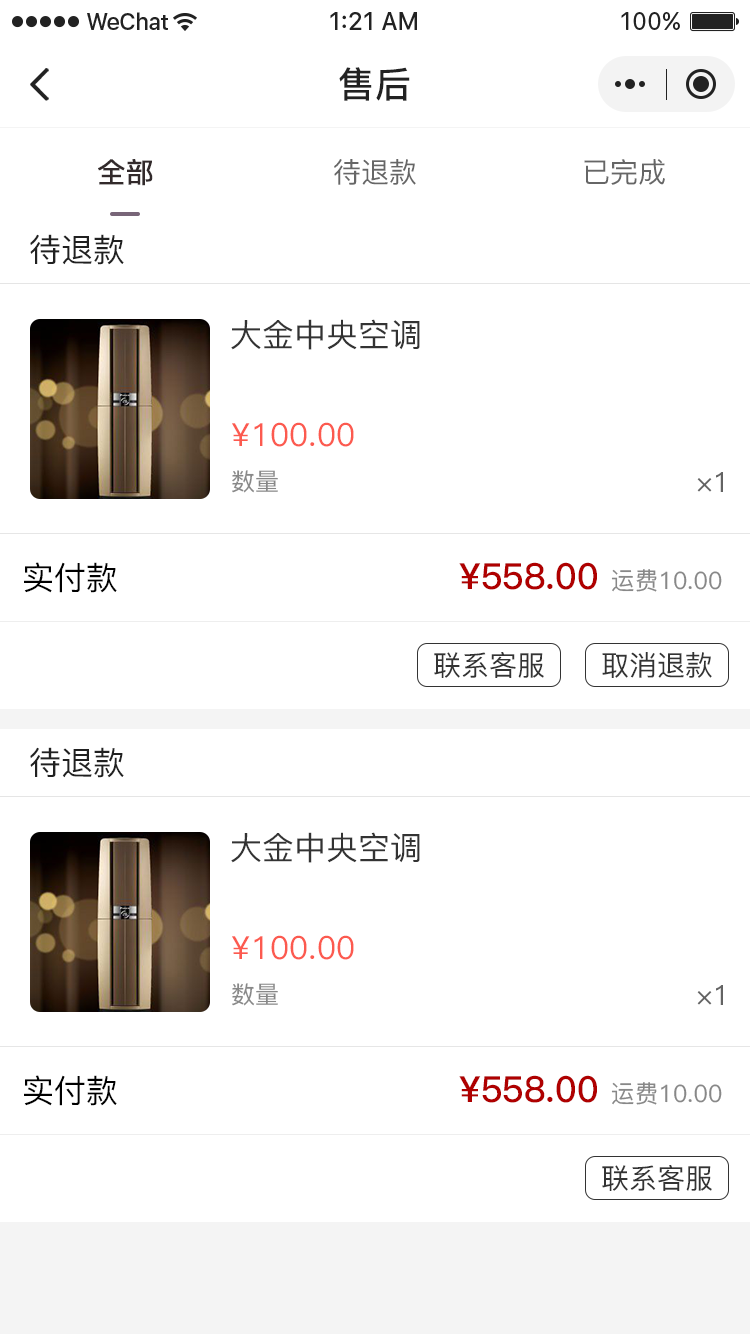
<style>
.page{position:relative;width:750px;height:1334px;background:#ffffff}
.page>*{position:absolute;margin:0}
.t1{font:36px "PingFang-SC-Bold";letter-spacing:0.028em;color:#222222}
.t2{font:28px "PingFang-SC-Medium";color:#322a2b;font-weight:bold}
.t3{font:28px "PingFang-SC-Medium";color:#666666}
.t4{font:32px "PingFang-SC-Medium";color:#202020}
.t5{font:32px "PingFang-SC-Medium";color:#333333;text-transform:uppercase}
.t6{font:32px "PingFang-SC-Medium";color:#fc5a4f;text-transform:uppercase}
.t7{font:24px "PingFang-SC-Medium";color:#888888;text-transform:uppercase}
.t8{font:28px "PingFang-SC-Medium";color:#636363;text-transform:uppercase}
.t9{font:32px "PingFang-SC-Medium";color:#000000;text-transform:uppercase}
.t10{font:36px "PingFang-SC-Bold";color:#af0000;text-transform:uppercase}
.t11{font:28px "PingFang-SC-Medium";color:#333333}
</style>
<div class="page">
<p class="t1" style="left:339px;top:67px;width:71px;height:34px">售后</p>
<p class="t2" style="left:98px;top:159px;width:55px;height:27px">全部</p>
<p class="t3" style="left:334px;top:159px;width:82px;height:26px">待退款</p>
<p class="t3" style="left:584px;top:159px;width:81px;height:26px">已完成</p>
<p class="t4" style="left:30px;top:234px;width:94px;height:31px">待退款</p>
<p class="t5" style="left:231px;top:319px;width:189px;height:31px">大金中央空调</p>
<p class="t6" style="left:232px;top:422px;width:122px;height:25px">¥100.00</p>
<p class="t7" style="left:232px;top:470px;width:46px;height:23px">数量</p>
<p class="t8" style="left:697px;top:472px;width:26px;height:20px">×1</p>
<p class="t9" style="left:24px;top:562px;width:93px;height:31px">实付款</p>
<p class="t10" style="left:459px;top:562px;width:263px;height:30px">¥558.00 <span class="t7">运费10.00</span></p>
<p class="t11" style="left:434px;top:652px;width:110px;height:26px">联系客服</p>
<p class="t11" style="left:602px;top:652px;width:110px;height:26px">取消退款</p>
<p class="t4" style="left:30px;top:747px;width:94px;height:31px">待退款</p>
<p class="t5" style="left:231px;top:832px;width:189px;height:31px">大金中央空调</p>
<p class="t6" style="left:232px;top:935px;width:122px;height:25px">¥100.00</p>
<p class="t7" style="left:232px;top:983px;width:46px;height:23px">数量</p>
<p class="t8" style="left:697px;top:985px;width:26px;height:20px">×1</p>
<p class="t9" style="left:24px;top:1075px;width:93px;height:31px">实付款</p>
<p class="t10" style="left:459px;top:1075px;width:263px;height:30px">¥558.00 <span class="t7">运费10.00</span></p>
<p class="t11" style="left:602px;top:1165px;width:110px;height:26px">联系客服</p>
</div>
